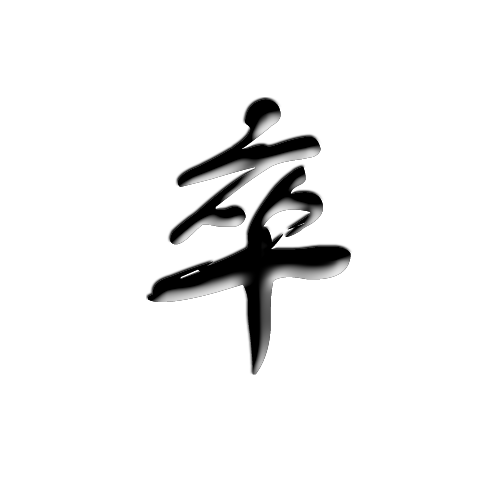
<style>
.page{position:relative;width:500px;height:500px;background:#ffffff}
.page>*{position:absolute;margin:0}
.t1{font:320px "FZSTK--GBK1-0"}
</style>
<div class="page">
<p class="t1" style="left:148px;top:99px;width:203px;height:276px">卒</p>
</div>
